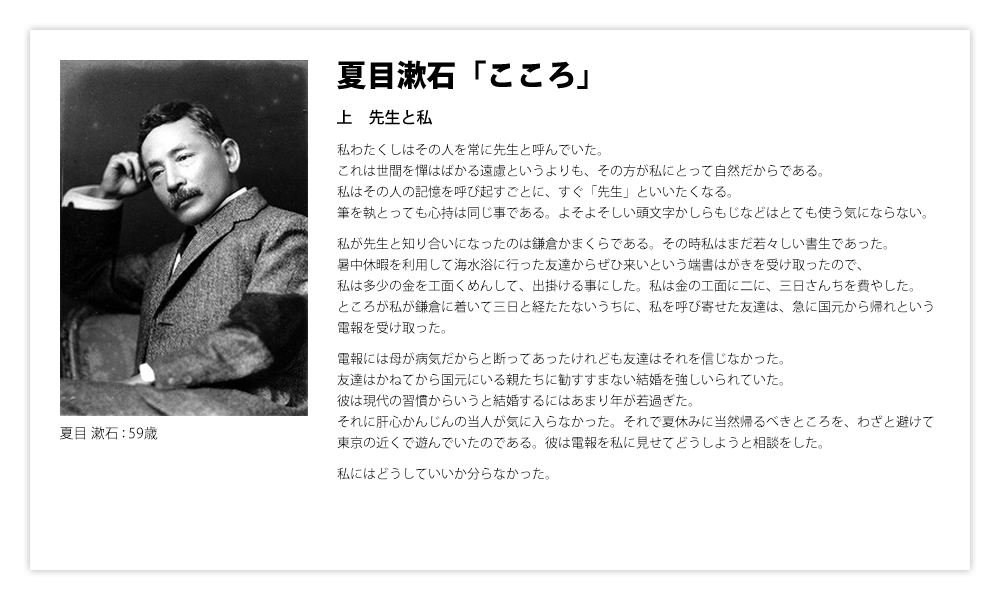
<style>
.page{position:relative;width:1000px;height:600px;background:#ffffff}
.page>*{position:absolute;margin:0}
.t1{font:30px "KozGoPr6N-Heavy";color:#000000}
.t2{font:16px "KozGoPr6N-Medium";color:#000000}
.t3{font:13px/21px "KozGoPr6N-Regular";color:#000000}
.t4{font:14px "KozGoPr6N-Regular";color:#000000}
</style>
<div class="page">
<p class="t1" style="left:337px;top:60px;width:251px;height:30px">夏目漱石「こころ」</p>
<p class="t2" style="left:337px;top:109px;width:95px;height:16px">上　先生と私</p>
<p class="t3" style="left:337px;top:143px;width:597px;height:337px">私わたくしはその人を常に先生と呼んでいた。<br>これは世間を憚はばかる遠慮というよりも、その方が私にとって自然だからである。<br>私はその人の記憶を呼び起すごとに、すぐ「先生」といいたくなる。<br>筆を執とっても心持は同じ事である。よそよそしい頭文字かしらもじなどはとても使う気にならない。<br>私が先生と知り合いになったのは鎌倉かまくらである。その時私はまだ若々しい書生であった。<br>暑中休暇を利用して海水浴に行った友達からぜひ来いという端書はがきを受け取ったので、<br>私は多少の金を工面くめんして、出掛ける事にした。私は金の工面に二に、三日さんちを費やした。<br>ところが私が鎌倉に着いて三日と経たたないうちに、私を呼び寄せた友達は、急に国元から帰れという<br>電報を受け取った。<br>電報には母が病気だからと断ってあったけれども友達はそれを信じなかった。<br>友達はかねてから国元にいる親たちに勧すすまない結婚を強しいられていた。<br>彼は現代の習慣からいうと結婚するにはあまり年が若過ぎた。<br>それに肝心かんじんの当人が気に入らなかった。それで夏休みに当然帰るべきところを、わざと避けて<br>東京の近くで遊んでいたのである。彼は電報を私に見せてどうしようと相談をした。<br>私にはどうしていいか分らなかった。</p>
<p class="t4" style="left:60px;top:426px;width:98px;height:14px">夏目 漱石 : 59歳</p>
</div>
